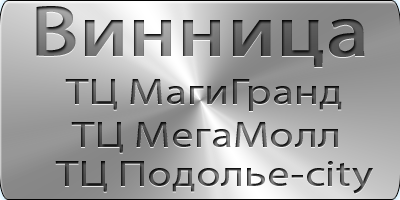
<style>
.page{position:relative;width:400px;height:200px}
.page>*{position:absolute;margin:0}
.t1{font:72px "MyriadPro-Regular";font-weight:bold;scale:1.19 1}
.t2{font:36px "MyriadPro-Regular";scale:1.27 1}
</style>
<div class="page">
<p class="t1" style="left:36px;top:6px;width:329px;height:61px">Винница</p>
<p class="t2" style="left:65px;top:79px;width:277px;height:32px">ТЦ МагиГранд</p>
<p class="t2" style="left:71px;top:122px;width:267px;height:31px">ТЦ МегаМолл</p>
<p class="t2" style="left:55px;top:161px;width:318px;height:33px">ТЦ Подолье-city</p>
</div>
